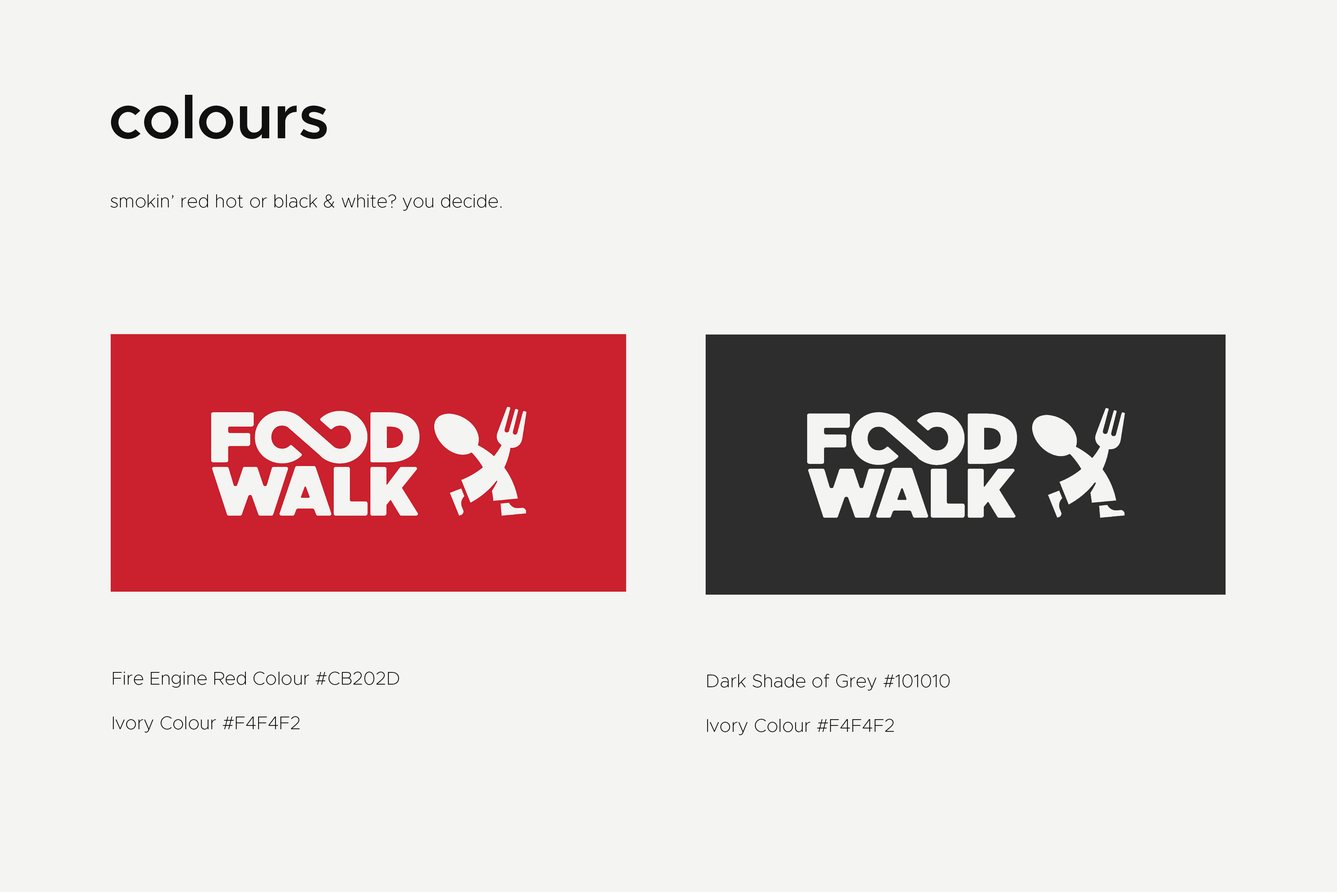
<style>
.page{position:relative;width:1337px;height:892px;background:#f4f4f2}
.page>*{position:absolute;margin:0}
.t1{font:61.9px "Metropolis-SemiBold";color:#101010}
.t2{font:18.6px "Metropolis-ExtraLight";color:#0f0f0f}
</style>
<div class="page">
<p class="t1" style="left:111px;top:95px;width:216px;height:44px">colours</p>
<p class="t2" style="left:110px;top:194px;width:392px;height:17px">smokin’ red hot or black &amp; white? you decide.</p>
<p class="t2" style="left:113px;top:671px;width:286px;height:61px">Fire Engine Red Colour #CB202D<br><br>Ivory Colour #F4F4F2</p>
<p class="t2" style="left:707px;top:674px;width:243px;height:61px">Dark Shade of Grey #101010<br><br>Ivory Colour #F4F4F2</p>
</div>
